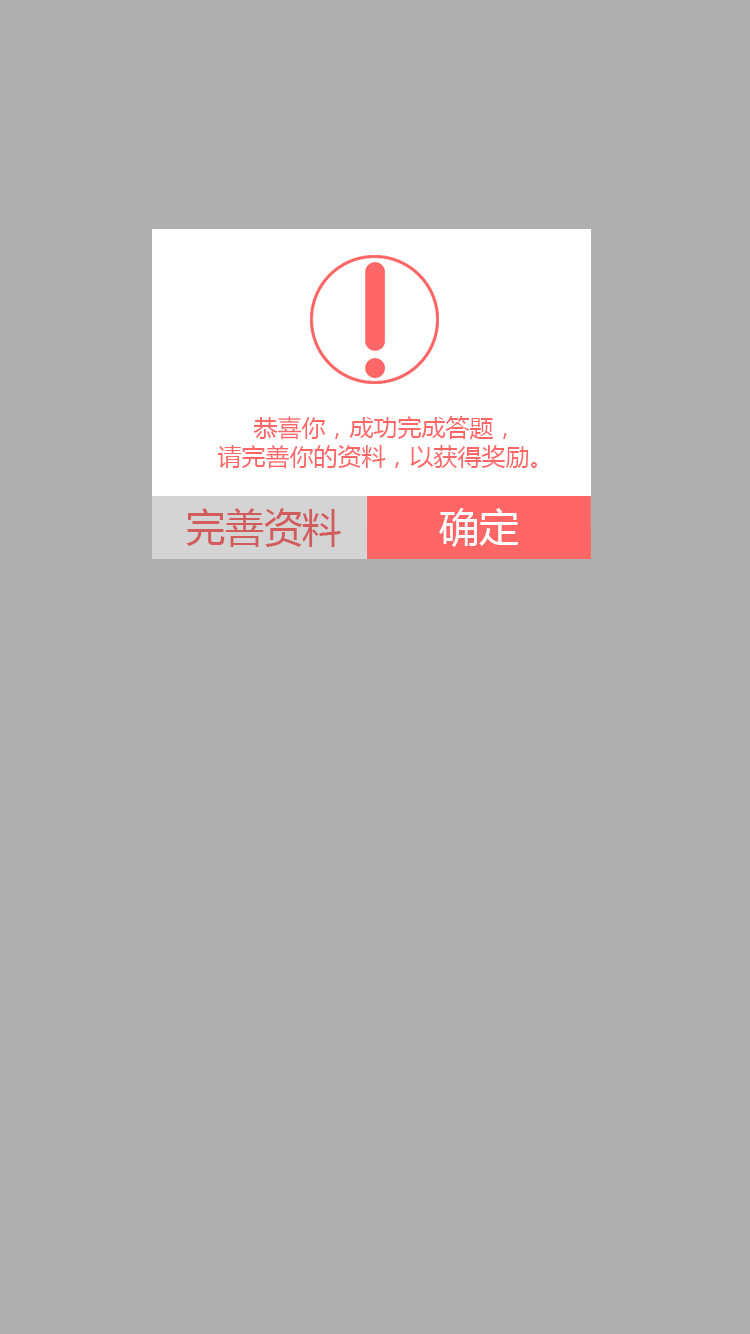
<style>
.page{position:relative;width:750px;height:1334px;background:#b0b0b0}
.page>*{position:absolute;margin:0}
.t1{font:24px "MicrosoftYaHei";color:#ff6666}
.t2{font:40px "MicrosoftYaHei";color:#d25c5c;scale:0.96 1}
.t3{font:40px "MicrosoftYaHei";color:#ffffff}
</style>
<div class="page">
<p class="t1" style="left:218px;top:416px;width:319px;height:53px;text-align:center">恭喜你，成功完成答题，<br>请完善你的资料，以获得奖励。</p>
<p class="t2" style="left:186px;top:508px;width:155px;height:39px">完善资料</p>
<p class="t3" style="left:439px;top:508px;width:80px;height:39px">确定</p>
</div>
